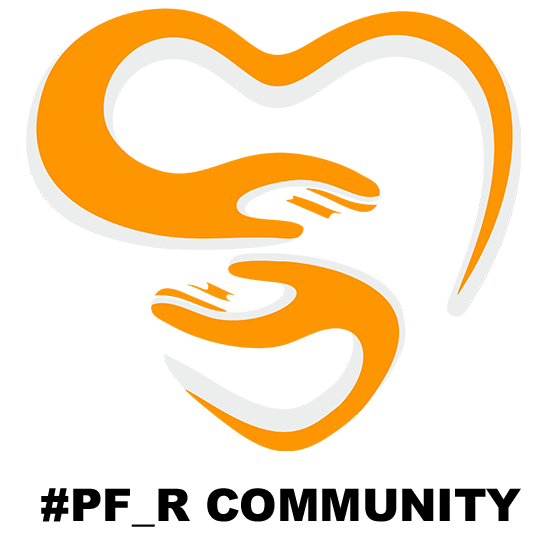
<style>
.page{position:relative;width:548px;height:548px;background:#ffffff}
.page>*{position:absolute;margin:0}
.t1{font:44.9px "Arial-Black";color:#000000}
</style>
<div class="page">
<p class="t1" style="left:41px;top:488px;width:480px;height:39px">#PF_R COMMUNITY</p>
</div>
